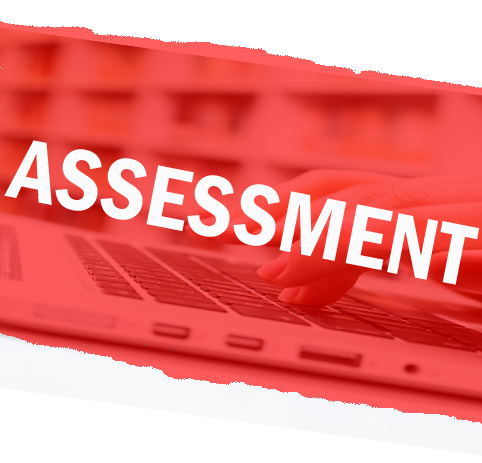
<style>
.page{position:relative;width:482px;height:463px;background:#ffffff}
.page>*{position:absolute;margin:0}
.t1{font:90px "FranklinGothic-DemiCond";color:#fcfcfc}
</style>
<div class="page">
<p class="t1" style="left:4px;top:140px;width:476px;height:145px;rotate:11deg">ASSESSMENT</p>
</div>
